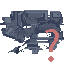
<style>
.page{position:relative;width:64px;height:64px;background:#ffffff}
.page>*{position:absolute;margin:0}
.t1{font:48px "MyriadPro-Regular";color:#c77675}
</style>
<div class="page">
<p class="t1" style="left:45px;top:29px;width:14px;height:33px">?</p>
</div>
